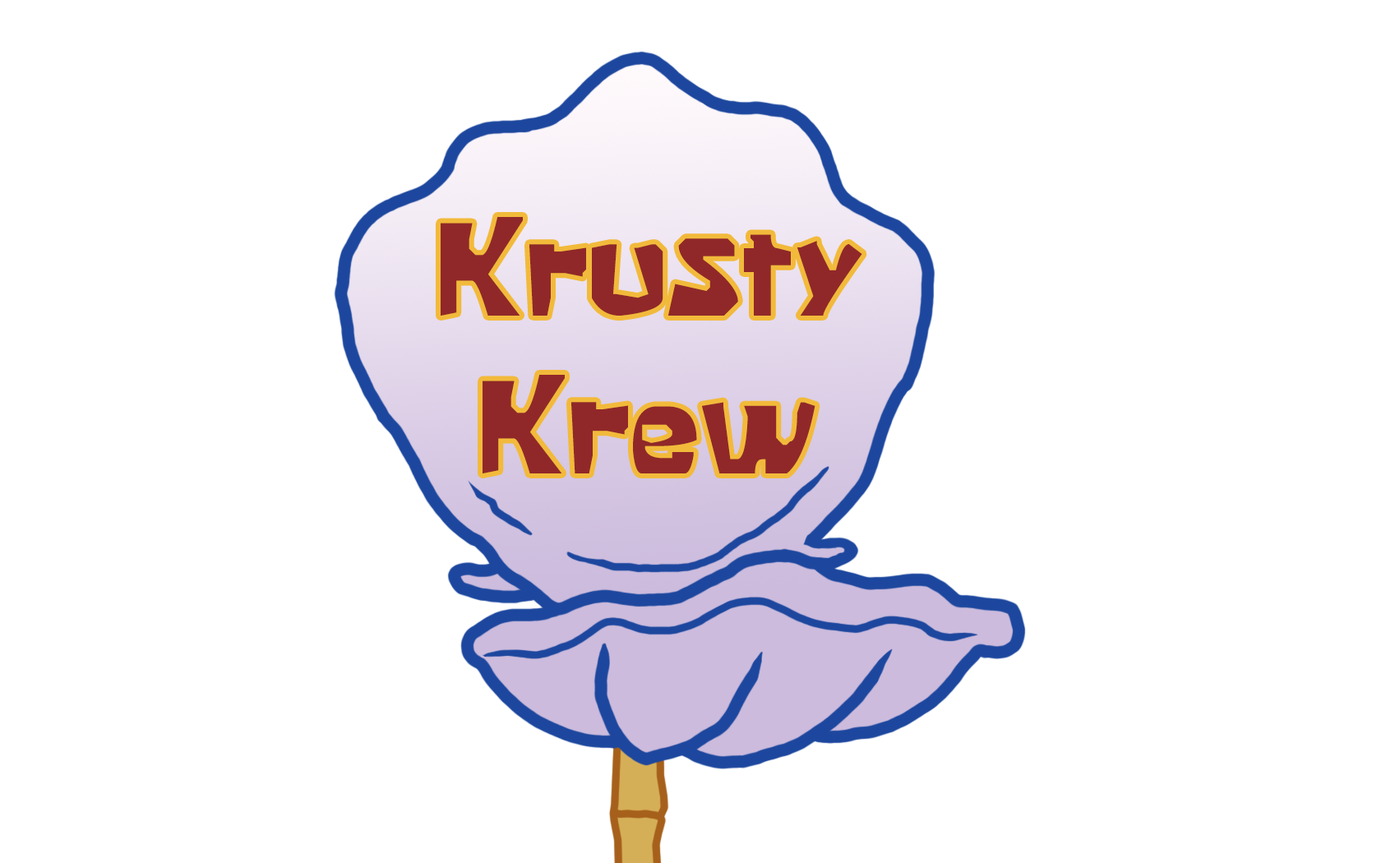
<style>
.page{position:relative;width:1381px;height:863px;background:#ffffff}
.page>*{position:absolute;margin:0}
.t1{font:131.8px "KrabbyPatty";color:#902829}
</style>
<div class="page">
<p class="t1" style="left:441px;top:217px;width:421px;height:257px;text-align:center">Krusty<br>Krew</p>
</div>
